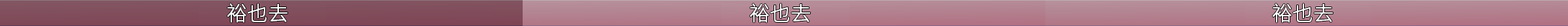
<style>
.page{position:relative;width:1568px;height:26px}
.page>*{position:absolute;margin:0}
.t1{font:20.6px "SourceHanSansSC-Normal";color:#ffffff}
</style>
<div class="page">
<p class="t1" style="left:227px;top:3px;width:60px;height:20px">裕也去</p>
<p class="t1" style="left:749px;top:3px;width:61px;height:20px">裕也去</p>
<p class="t1" style="left:1272px;top:3px;width:61px;height:20px">裕也去</p>
</div>
